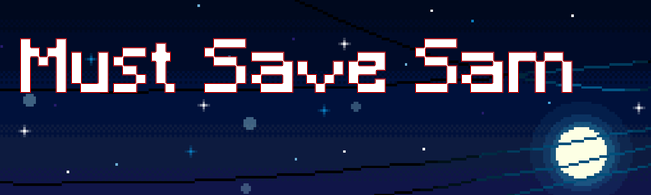
<style>
.page{position:relative;width:651px;height:195px}
.page>*{position:absolute;margin:0}
.t1{font:71.5px "Minecraft";color:#ffffff;font-weight:bold}
</style>
<div class="page">
<p class="t1" style="left:20px;top:38px;width:553px;height:55px">Must Save Sam</p>
</div>
